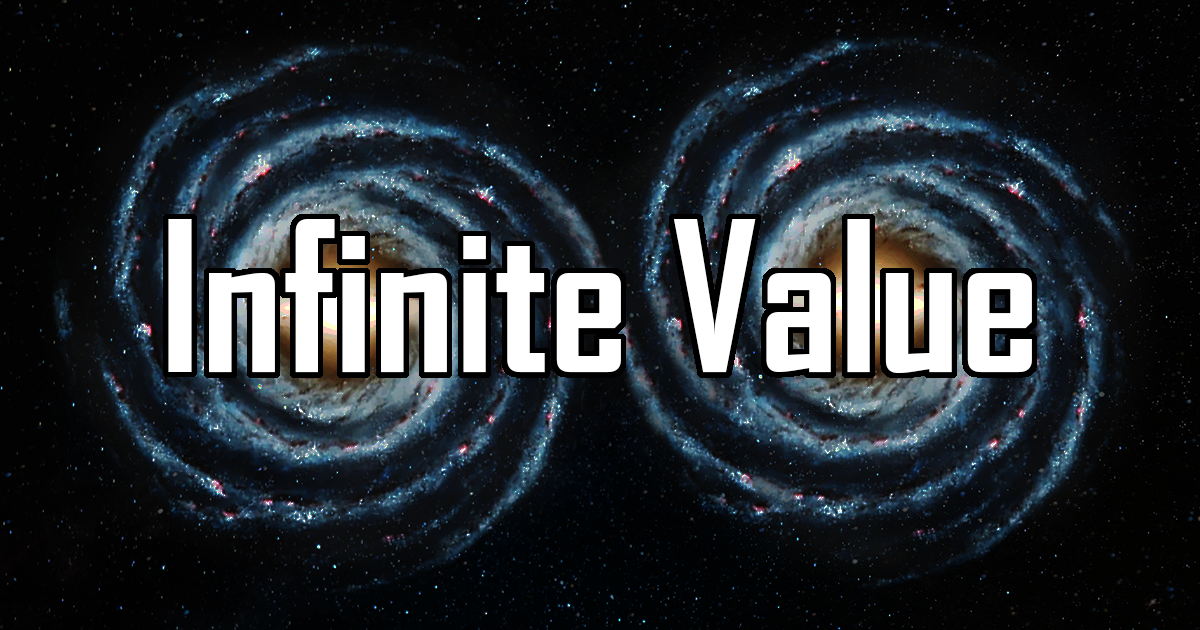
<style>
.page{position:relative;width:1200px;height:630px}
.page>*{position:absolute;margin:0}
.t1{font:200px "AgencyFB-Bold";color:#ffffff}
</style>
<div class="page">
<p class="t1" style="left:168px;top:219px;width:864px;height:154px">Infinite Value</p>
</div>
